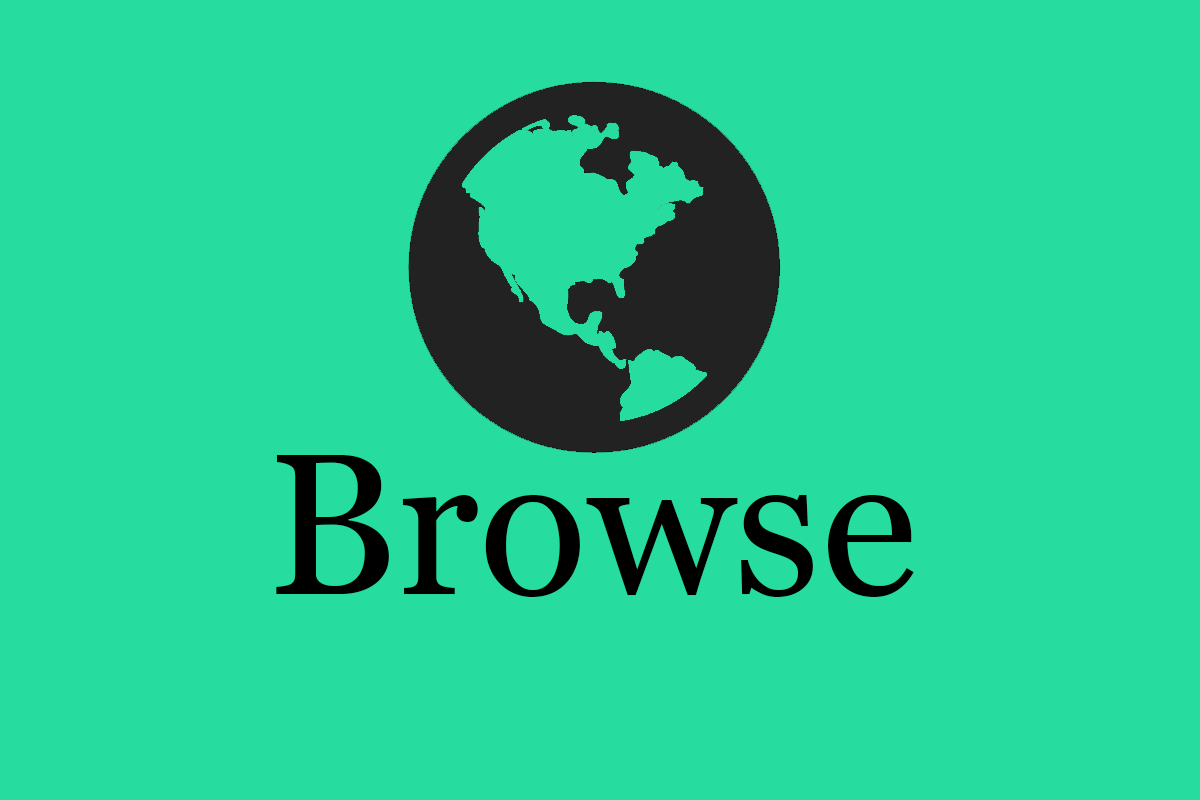
<style>
.page{position:relative;width:1200px;height:800px;background:#26dd9f}
.page>*{position:absolute;margin:0}
.t1{font:200px "Georgia";color:#000000}
</style>
<div class="page">
<p class="t1" style="left:276px;top:455px;width:638px;height:142px">Browse</p>
</div>
